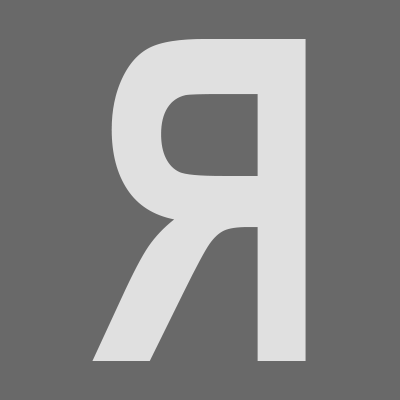
<style>
.page{position:relative;width:400px;height:400px;background:#696969}
.page>*{position:absolute;margin:0}
.t1{font:450px "Arial-BoldMT";color:#e0e0e0;scale:0.73 1}
</style>
<div class="page">
<p class="t1" style="left:92px;top:39px;width:214px;height:322px;rotate:180deg">R</p>
</div>
